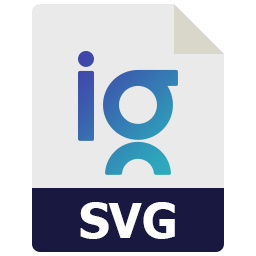
<style>
.page{position:relative;width:256px;height:256px;background:#eaeaea}
.page>*{position:absolute;margin:0}
.t1{font:48px "Tahoma-Bold";color:#ffffff}
</style>
<div class="page">
<p class="t1" style="left:80px;top:202px;width:95px;height:37px">SVG</p>
</div>
